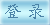
<style>
.page{position:relative;width:50px;height:25px}
.page>*{position:absolute;margin:0}
.t1{font:18px "STKaiti";color:#4b83a7}
</style>
<div class="page">
<p class="t1" style="left:5px;top:4px;width:39px;height:15px">登 录</p>
</div>
